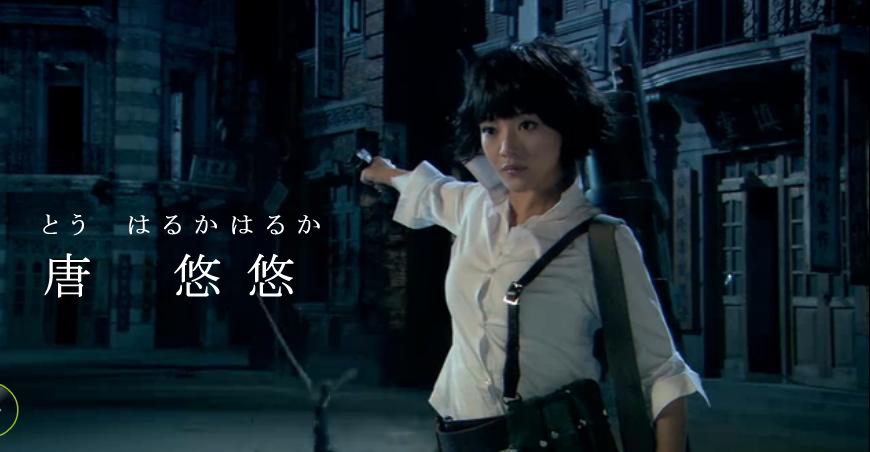
<style>
.page{position:relative;width:870px;height:452px}
.page>*{position:absolute;margin:0}
.t1{font:24px "MS-PMincho";letter-spacing:0.5em;color:#ffffff;font-weight:bold}
.t2{font:48px "MS-PMincho";letter-spacing:0.5em;color:#ffffff;font-weight:bold}
</style>
<div class="page">
<p class="t1" style="left:43px;top:214px;width:277px;height:22px">とう　はるかはるか</p>
<p class="t2" style="left:44px;top:253px;width:250px;height:45px">唐　悠悠</p>
</div>
